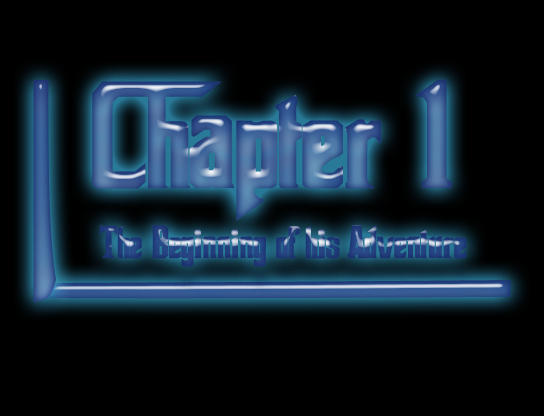
<style>
.page{position:relative;width:544px;height:416px;background:#000000}
.page>*{position:absolute;margin:0}
.t1{font:150px "Godfather";scale:1.19 1}
.t2{font:45.5px "Godfather";color:#23417f;scale:1.13 1}
</style>
<div class="page">
<p class="t1" style="left:92px;top:79px;width:360px;height:142px">Chapter 1</p>
<p class="t2" style="left:99px;top:225px;width:368px;height:42px">The Beginning of his Adventure</p>
</div>
